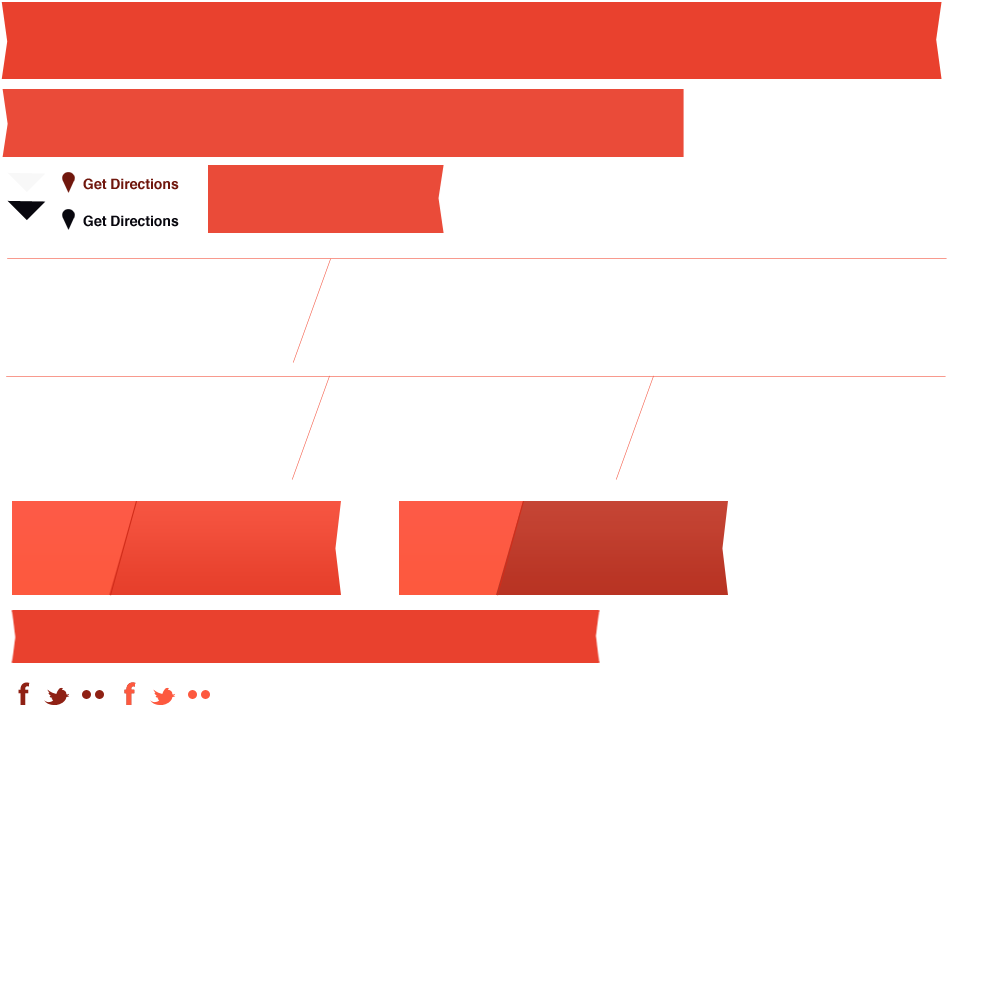
<style>
.page{position:relative;width:1000px;height:1000px;background:#ffffff}
.page>*{position:absolute;margin:0}
.t1{font:14px "Helvetica-Bold";color:#70170d}
.t2{font:14px "Helvetica-Bold";color:#08070e}
</style>
<div class="page">
<p class="t1" style="left:83px;top:178px;width:96px;height:12px">Get Directions</p>
<p class="t2" style="left:83px;top:215px;width:96px;height:12px">Get Directions</p>
</div>
